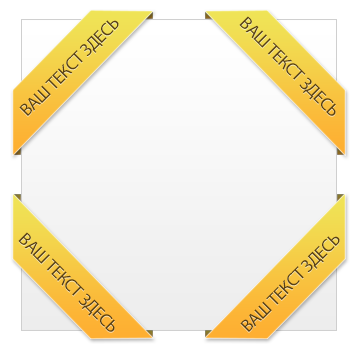
<style>
.page{position:relative;width:360px;height:352px}
.page>*{position:absolute;margin:0}
.t1{font:18px "MyriadPro-Regular";letter-spacing:-0.03em;color:#584013;text-transform:uppercase}
</style>
<div class="page">
<p class="t1" style="left:239px;top:16px;width:97px;height:100px;rotate:45deg">ВАШ ТЕКСТ ЗДЕСЬ</p>
<p class="t1" style="left:19px;top:20px;width:100px;height:96px;rotate:-45deg">ВАШ ТЕКСТ ЗДЕСЬ</p>
<p class="t1" style="left:18px;top:232px;width:97px;height:100px;rotate:45deg">ВАШ ТЕКСТ ЗДЕСЬ</p>
<p class="t1" style="left:240px;top:236px;width:100px;height:96px;rotate:-45deg">ВАШ ТЕКСТ ЗДЕСЬ</p>
</div>
